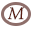
<style>
.page{position:relative;width:31px;height:30px;background:#ffffff}
.page>*{position:absolute;margin:0}
.t1{font:16.7px "BookAntiqua-Italic";color:#592016}
</style>
<div class="page">
<p class="t1" style="left:7px;top:7px;width:17px;height:13px">M</p>
</div>
